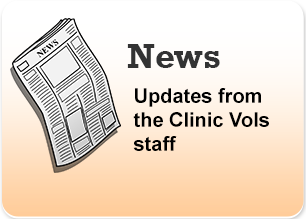
<style>
.page{position:relative;width:306px;height:219px}
.page>*{position:absolute;margin:0}
.t1{font:35px "Rockwell-Bold";color:#333333}
.t2{font:20px "Arial-BoldMT";color:#000000}
</style>
<div class="page">
<p class="t1" style="left:127px;top:44px;width:93px;height:24px">News</p>
<p class="t2" style="left:133px;top:88px;width:136px;height:63px">Updates from the Clinic Vols staff</p>
</div>
